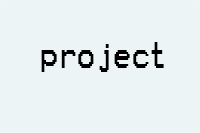
<style>
.page{position:relative;width:200px;height:133px;background:#ecf4f6}
.page>*{position:absolute;margin:0}
.t1{font:31.9px "Terminal";color:#000000;scale:0.76 1}
</style>
<div class="page">
<p class="t1" style="left:41px;top:42px;width:123px;height:30px">project</p>
</div>
